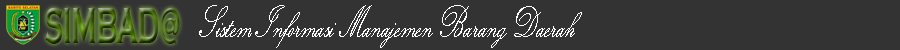
<style>
.page{position:relative;width:900px;height:50px;background:#333333}
.page>*{position:absolute;margin:0}
.t1{font:46.8px "KunstlerScript";color:#ffffff;scale:0.61 1}
.t2{font:53.2px "CopperplateGothic-Bold";scale:0.49 1}
</style>
<div class="page">
<p class="t1" style="left:199px;top:5px;width:383px;height:43px">Sistem Informasi Manajemen Barang Daerah</p>
<p class="t2" style="left:45px;top:8px;width:135px;height:36px">SIMBAD@</p>
</div>
